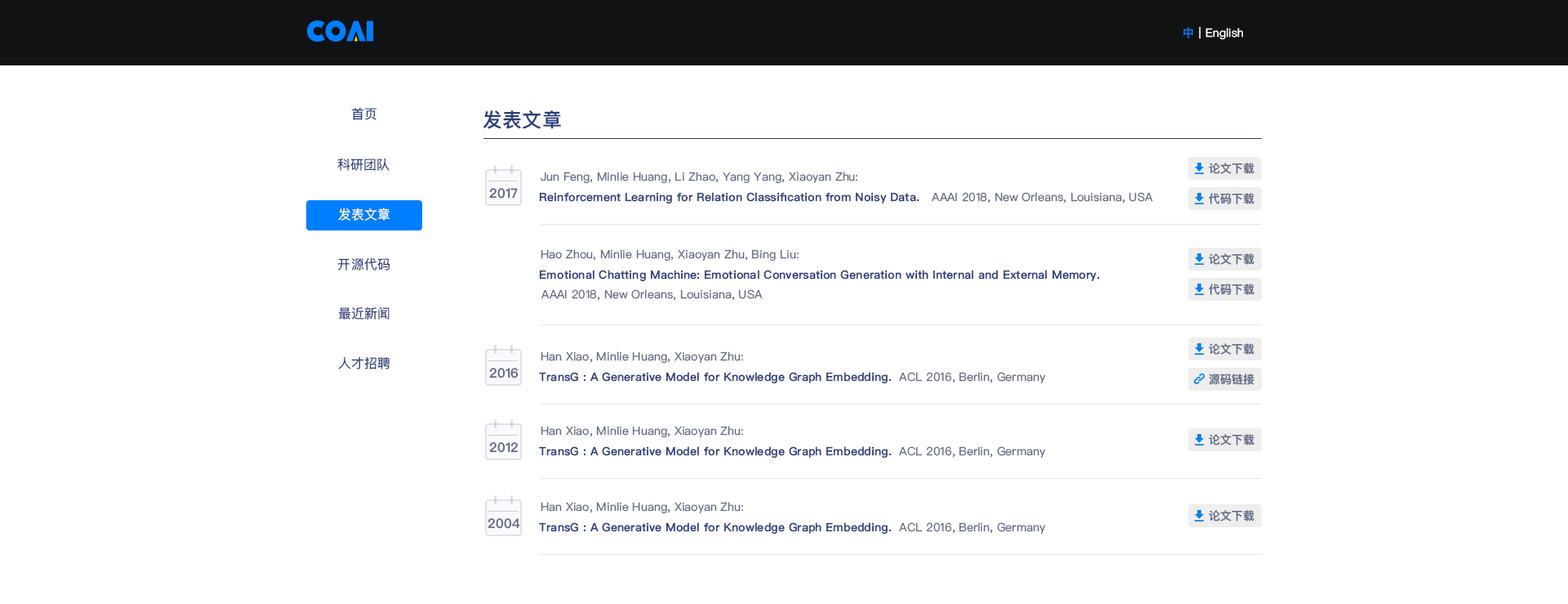
<style>
.page{position:relative;width:1568px;height:604px;background:#ffffff}
.page>*{position:absolute;margin:0}
.t1{font:11.4px "PingFangSC-Regular";letter-spacing:0.01em;color:#007eff}
.t2{font:11.4px "PingFangSC-Regular";letter-spacing:0.01em;color:#ffffff}
.t3{font:13.1px "PingFangSC-Regular";letter-spacing:0.01em;color:#2c3e81}
.t4{font:19.6px "PingFangSC-Semibold";letter-spacing:0.01em;color:#2c3e81}
.t5{font:11.4px "PingFangSC-Regular";letter-spacing:0.01em;color:#646b88}
.t6{font:11.4px "PingFangSC-Semibold";letter-spacing:0.01em;color:#646b88}
.t7{font:13.1px "PingFangSC-Semibold";letter-spacing:0.01em;color:#646b88}
.t8{font:11.4px "PingFangSC-Semibold";letter-spacing:0.01em;color:#2c3e81}
.t9{font:13.1px "PingFangSC-Regular";letter-spacing:0.01em;color:#fefefe}
</style>
<div class="page">
<p class="t1" style="left:1183px;top:27px;width:10px;height:11px">中</p>
<p class="t2" style="left:1199px;top:26px;width:44px;height:14px">| English</p>
<p class="t3" style="left:351px;top:107px;width:26px;height:13px">首页</p>
<p class="t4" style="left:483px;top:110px;width:78px;height:19px">发表文章</p>
<p class="t3" style="left:337px;top:158px;width:53px;height:13px">科研团队</p>
<p class="t5" style="left:541px;top:172px;width:317px;height:12px">Jun Feng, Minlie Huang, Li Zhao, Yang Yang, Xiaoyan Zhu:</p>
<p class="t6" style="left:1209px;top:163px;width:45px;height:11px">论文下载</p>
<p class="t7" style="left:489px;top:188px;width:29px;height:10px">2017</p>
<p class="t8" style="left:539px;top:192px;width:381px;height:12px">Reinforcement Learning for Relation Classification from Noisy Data.</p>
<p class="t5" style="left:932px;top:192px;width:221px;height:11px">AAAI 2018, New Orleans, Louisiana, USA</p>
<p class="t6" style="left:1209px;top:193px;width:45px;height:11px">代码下载</p>
<p class="t9" style="left:338px;top:207px;width:52px;height:13px">发表文章</p>
<p class="t3" style="left:337px;top:257px;width:53px;height:13px">开源代码</p>
<p class="t5" style="left:541px;top:249px;width:258px;height:12px">Hao Zhou, Minlie Huang, Xiaoyan Zhu, Bing Liu:</p>
<p class="t6" style="left:1209px;top:253px;width:45px;height:12px">论文下载</p>
<p class="t8" style="left:539px;top:270px;width:561px;height:12px">Emotional Chatting Machine: Emotional Conversation Generation with Internal and External Memory.</p>
<p class="t5" style="left:541px;top:289px;width:222px;height:12px">AAAI 2018, New Orleans, Louisiana, USA</p>
<p class="t6" style="left:1209px;top:283px;width:45px;height:12px">代码下载</p>
<p class="t3" style="left:338px;top:306px;width:52px;height:13px">最近新闻</p>
<p class="t5" style="left:541px;top:351px;width:202px;height:12px">Han Xiao, Minlie Huang, Xiaoyan Zhu:</p>
<p class="t6" style="left:1209px;top:343px;width:45px;height:11px">论文下载</p>
<p class="t3" style="left:338px;top:356px;width:52px;height:13px">人才招聘</p>
<p class="t7" style="left:489px;top:368px;width:30px;height:10px">2016</p>
<p class="t8" style="left:539px;top:372px;width:353px;height:12px">TransG : A Generative Model for Knowledge Graph Embedding.</p>
<p class="t5" style="left:899px;top:372px;width:146px;height:11px">ACL 2016, Berlin, Germany</p>
<p class="t6" style="left:1209px;top:373px;width:45px;height:12px">源码链接</p>
<p class="t5" style="left:541px;top:425px;width:202px;height:13px">Han Xiao, Minlie Huang, Xiaoyan Zhu:</p>
<p class="t6" style="left:1209px;top:434px;width:45px;height:11px">论文下载</p>
<p class="t7" style="left:489px;top:442px;width:29px;height:10px">2012</p>
<p class="t8" style="left:539px;top:446px;width:353px;height:12px">TransG : A Generative Model for Knowledge Graph Embedding.</p>
<p class="t5" style="left:899px;top:446px;width:146px;height:11px">ACL 2016, Berlin, Germany</p>
<p class="t5" style="left:541px;top:501px;width:202px;height:13px">Han Xiao, Minlie Huang, Xiaoyan Zhu:</p>
<p class="t6" style="left:1209px;top:510px;width:45px;height:11px">论文下载</p>
<p class="t7" style="left:488px;top:518px;width:32px;height:10px">2004</p>
<p class="t8" style="left:539px;top:522px;width:353px;height:12px">TransG : A Generative Model for Knowledge Graph Embedding.</p>
<p class="t5" style="left:899px;top:522px;width:146px;height:11px">ACL 2016, Berlin, Germany</p>
</div>
